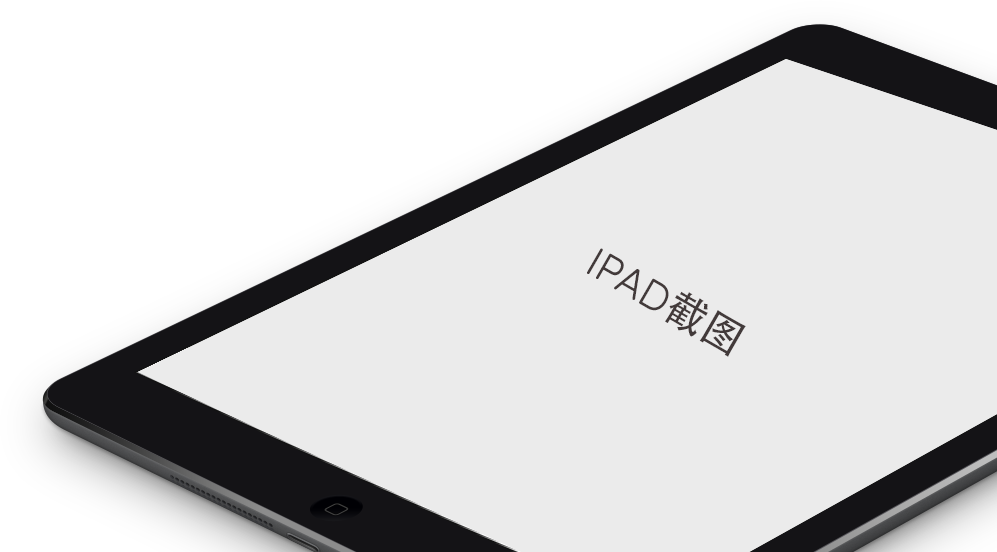
<style>
.page{position:relative;width:997px;height:552px;background:#ebebeb}
.page>*{position:absolute;margin:0}
.t1{font:41.7px "SofiaProSoftLight";color:#423a3a}
.t2{font:41.7px "AdobeHeitiStd-Regular";color:#423a3a}
</style>
<div class="page">
<p class="t1" style="left:587px;top:248px;width:159px;height:109px;rotate:30deg">IPAD<span class="t2">截图</span></p>
</div>
